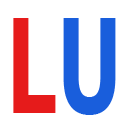
<style>
.page{position:relative;width:128px;height:128px;background:#ffffff}
.page>*{position:absolute;margin:0}
.t1{font:130.5px "Verdana-Bold";color:#e61b1b;scale:0.61 1}
.t2{font:130.5px "Verdana-Bold";color:#195edc;scale:0.61 1}
</style>
<div class="page">
<p class="t1" style="left:13px;top:18px;width:103px;height:97px">L<span class="t2">U</span></p>
</div>
